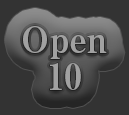
<style>
.page{position:relative;width:129px;height:115px;background:#333333}
.page>*{position:absolute;margin:0}
.t1{font:36px/37px "RyuminPro-ExBold";color:#a1a1a1}
</style>
<div class="page">
<p class="t1" style="left:23px;top:26px;width:84px;height:64px;text-align:center">Open<br>10</p>
</div>
